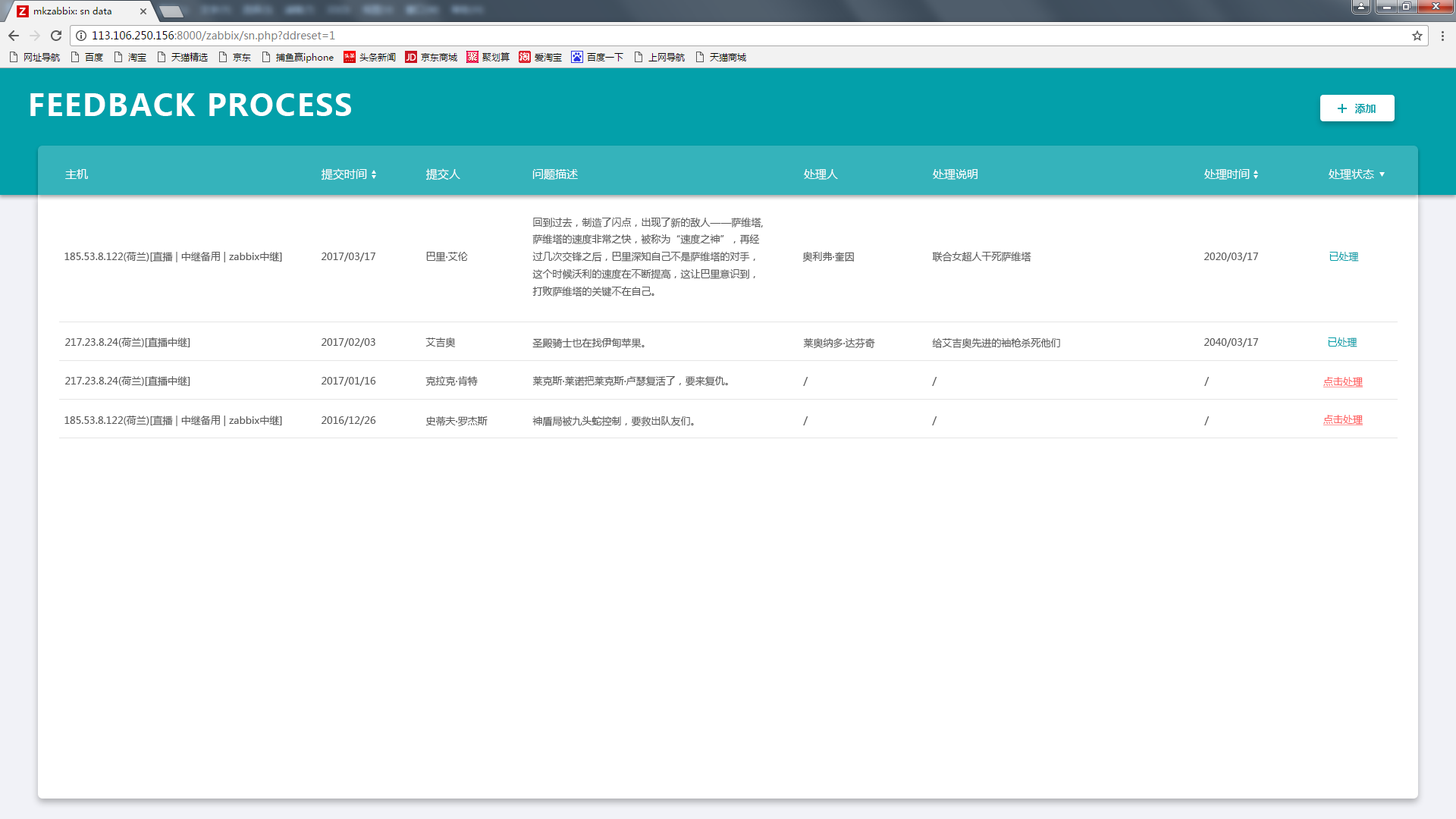
<style>
.page{position:relative;width:1456px;height:819px;background:#ffffff}
.page>*{position:absolute;margin:0}
.t1{font:29.6px "MicrosoftYaHei-Bold";letter-spacing:0.05em;color:#ffffff;text-transform:uppercase}
.t2{font:10.6px "MicrosoftYaHei-Bold";color:#03a0aa}
.t3{font:11.4px "MicrosoftYaHei";color:#ffffff}
.t4{font:9.9px "MicrosoftYaHei";color:#5b5b5b}
.t5{font:9.9px "MicrosoftYaHei";color:#03a0aa}
.t6{font:9.9px "MicrosoftYaHei";color:#ff6666;text-decoration:underline}
</style>
<div class="page">
<p class="t1" style="left:30px;top:93px;width:321px;height:23px">Feedback process</p>
<p class="t2" style="left:1354px;top:103px;width:22px;height:11px">添加</p>
<p class="t3" style="left:65px;top:169px;width:23px;height:10px">主机</p>
<p class="t3" style="left:322px;top:168px;width:45px;height:12px">提交时间</p>
<p class="t3" style="left:426px;top:168px;width:34px;height:12px">提交人</p>
<p class="t3" style="left:532px;top:169px;width:46px;height:11px">问题描述</p>
<p class="t3" style="left:804px;top:169px;width:34px;height:11px">处理人</p>
<p class="t3" style="left:933px;top:169px;width:44px;height:11px">处理说明</p>
<p class="t3" style="left:1204px;top:169px;width:46px;height:11px">处理时间</p>
<p class="t3" style="left:1329px;top:169px;width:45px;height:11px">处理状态</p>
<p class="t4" style="left:532px;top:217px;width:231px;height:80px">回到过去，制造了闪点，出现了新的敌人——萨维塔,<br>萨维塔的速度非常之快，被称为“速度之神”，再经<br>过几次交锋之后，巴里深知自己不是萨维塔的对手，<br>这个时候沃利的速度在不断提高，这让巴里意识到，<br>打败萨维塔的关键不在自己。</p>
<p class="t4" style="left:64px;top:251px;width:218px;height:11px">185.53.8.122(荷兰)[直播 | 中继备用 | zabbix中继]</p>
<p class="t4" style="left:322px;top:253px;width:54px;height:9px">2017/03/17</p>
<p class="t4" style="left:426px;top:252px;width:42px;height:10px">巴里·艾伦</p>
<p class="t4" style="left:802px;top:251px;width:52px;height:11px">奥利弗·奎因</p>
<p class="t4" style="left:932px;top:251px;width:99px;height:11px">联合女超人干死萨维塔</p>
<p class="t4" style="left:1204px;top:253px;width:55px;height:9px">2020/03/17</p>
<p class="t5" style="left:1329px;top:252px;width:30px;height:10px">已处理</p>
<p class="t4" style="left:65px;top:337px;width:125px;height:10px">217.23.8.24(荷兰)[直播中继]</p>
<p class="t4" style="left:322px;top:338px;width:53px;height:9px">2017/02/03</p>
<p class="t4" style="left:425px;top:337px;width:31px;height:11px">艾吉奥</p>
<p class="t4" style="left:532px;top:338px;width:113px;height:10px">圣殿骑士也在找伊甸苹果。</p>
<p class="t4" style="left:803px;top:337px;width:72px;height:12px">莱奥纳多·达芬奇</p>
<p class="t4" style="left:932px;top:337px;width:128px;height:12px">给艾吉奥先进的袖枪杀死他们</p>
<p class="t4" style="left:1204px;top:338px;width:55px;height:9px">2040/03/17</p>
<p class="t5" style="left:1328px;top:337px;width:29px;height:10px">已处理</p>
<p class="t4" style="left:65px;top:375px;width:125px;height:11px">217.23.8.24(荷兰)[直播中继]</p>
<p class="t4" style="left:322px;top:377px;width:54px;height:9px">2017/01/16</p>
<p class="t4" style="left:425px;top:375px;width:53px;height:11px">克拉克·肯特</p>
<p class="t4" style="left:532px;top:376px;width:196px;height:10px">莱克斯·莱诺把莱克斯·卢瑟复活了，要来复仇。</p>
<p class="t4" style="left:803px;top:377px;width:5px;height:9px">/</p>
<p class="t4" style="left:932px;top:377px;width:5px;height:9px">/</p>
<p class="t4" style="left:1204px;top:377px;width:6px;height:9px">/</p>
<p class="t6" style="left:1323px;top:377px;width:40px;height:11px">点击处理</p>
<p class="t4" style="left:64px;top:415px;width:218px;height:11px">185.53.8.122(荷兰)[直播 | 中继备用 | zabbix中继]</p>
<p class="t4" style="left:322px;top:416px;width:54px;height:9px">2016/12/26</p>
<p class="t4" style="left:425px;top:416px;width:63px;height:11px">史蒂夫·罗杰斯</p>
<p class="t4" style="left:532px;top:416px;width:162px;height:10px">神盾局被九头蛇控制，要救出队友们。</p>
<p class="t4" style="left:803px;top:416px;width:5px;height:9px">/</p>
<p class="t4" style="left:932px;top:416px;width:5px;height:9px">/</p>
<p class="t4" style="left:1204px;top:416px;width:6px;height:9px">/</p>
<p class="t6" style="left:1323px;top:415px;width:40px;height:10px">点击处理</p>
</div>
